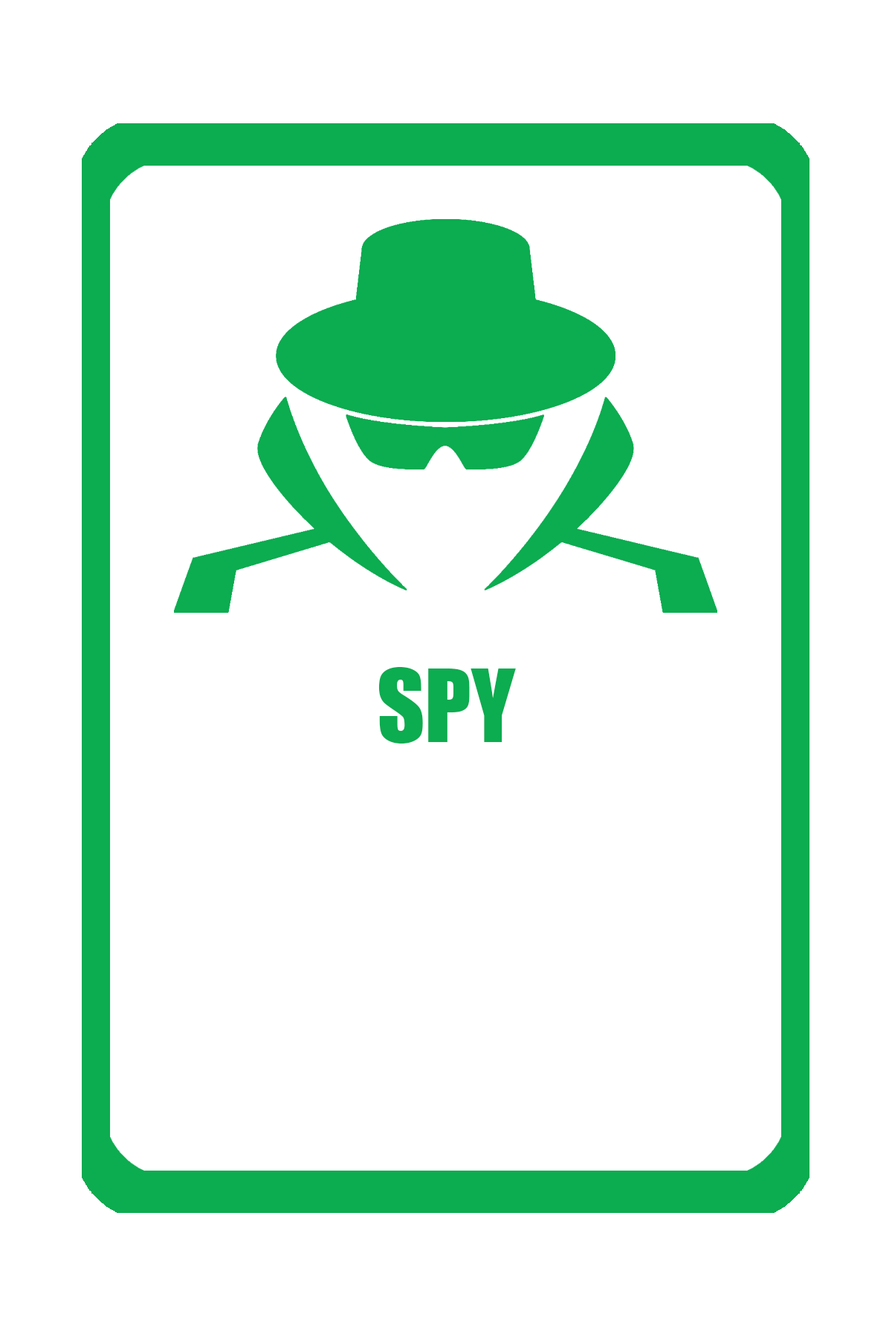
<style>
.page{position:relative;width:892px;height:1337px;background:#ffffff}
.page>*{position:absolute;margin:0}
.t1{font:92.9px "Impact";color:#0cac50}
</style>
<div class="page">
<p class="t1" style="left:378px;top:667px;width:138px;height:77px">SPY</p>
</div>
